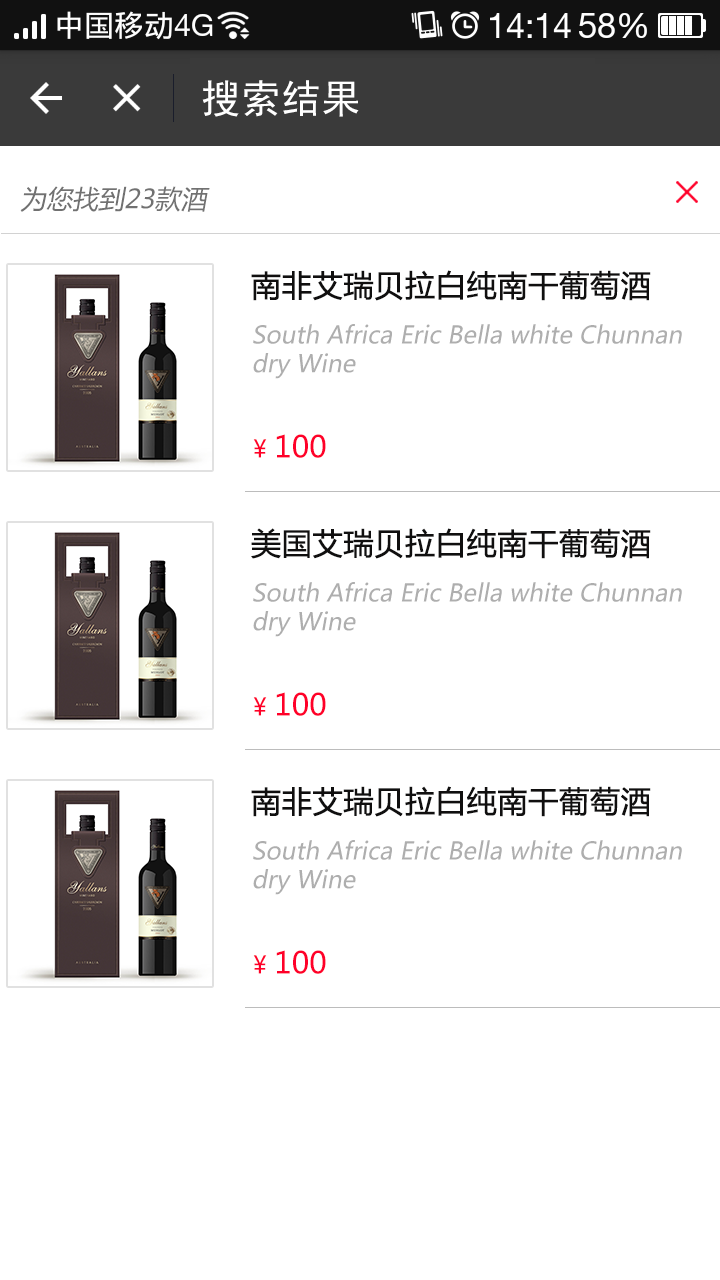
<style>
.page{position:relative;width:720px;height:1280px;background:#ffffff}
.page>*{position:absolute;margin:0}
.t1{font:40px "SimHei";color:#ffffff}
.t2{font:26px "MicrosoftYaHei";color:#717171;font-style:italic}
.t3{font:30px "MicrosoftYaHei";color:#100f0f;font-weight:bold}
.t4{font:24px "MicrosoftYaHei";color:#aeaeae;font-style:italic}
.t5{font:30px "MicrosoftYaHei";color:#ff0029}
.t6{font:24px "MicrosoftYaHei";color:#ff0029}
</style>
<div class="page">
<p class="t1" style="left:202px;top:80px;width:157px;height:37px">搜索结果</p>
<p class="t2" style="left:20px;top:186px;width:190px;height:26px">为您找到23款酒</p>
<p class="t3" style="left:251px;top:270px;width:400px;height:31px">南非艾瑞贝拉白纯南干葡萄酒</p>
<p class="t4" style="left:253px;top:324px;width:429px;height:55px">South Africa Eric Bella white Chunnan <br>dry Wine</p>
<p class="t5" style="left:253px;top:434px;width:73px;height:24px"><span class="t6">¥ </span>100</p>
<p class="t3" style="left:251px;top:528px;width:400px;height:31px">美国艾瑞贝拉白纯南干葡萄酒</p>
<p class="t4" style="left:253px;top:582px;width:429px;height:55px">South Africa Eric Bella white Chunnan <br>dry Wine</p>
<p class="t5" style="left:253px;top:692px;width:73px;height:24px"><span class="t6">¥ </span>100</p>
<p class="t3" style="left:251px;top:786px;width:400px;height:31px">南非艾瑞贝拉白纯南干葡萄酒</p>
<p class="t4" style="left:253px;top:840px;width:429px;height:55px">South Africa Eric Bella white Chunnan <br>dry Wine</p>
<p class="t5" style="left:253px;top:950px;width:73px;height:24px"><span class="t6">¥ </span>100</p>
</div>
